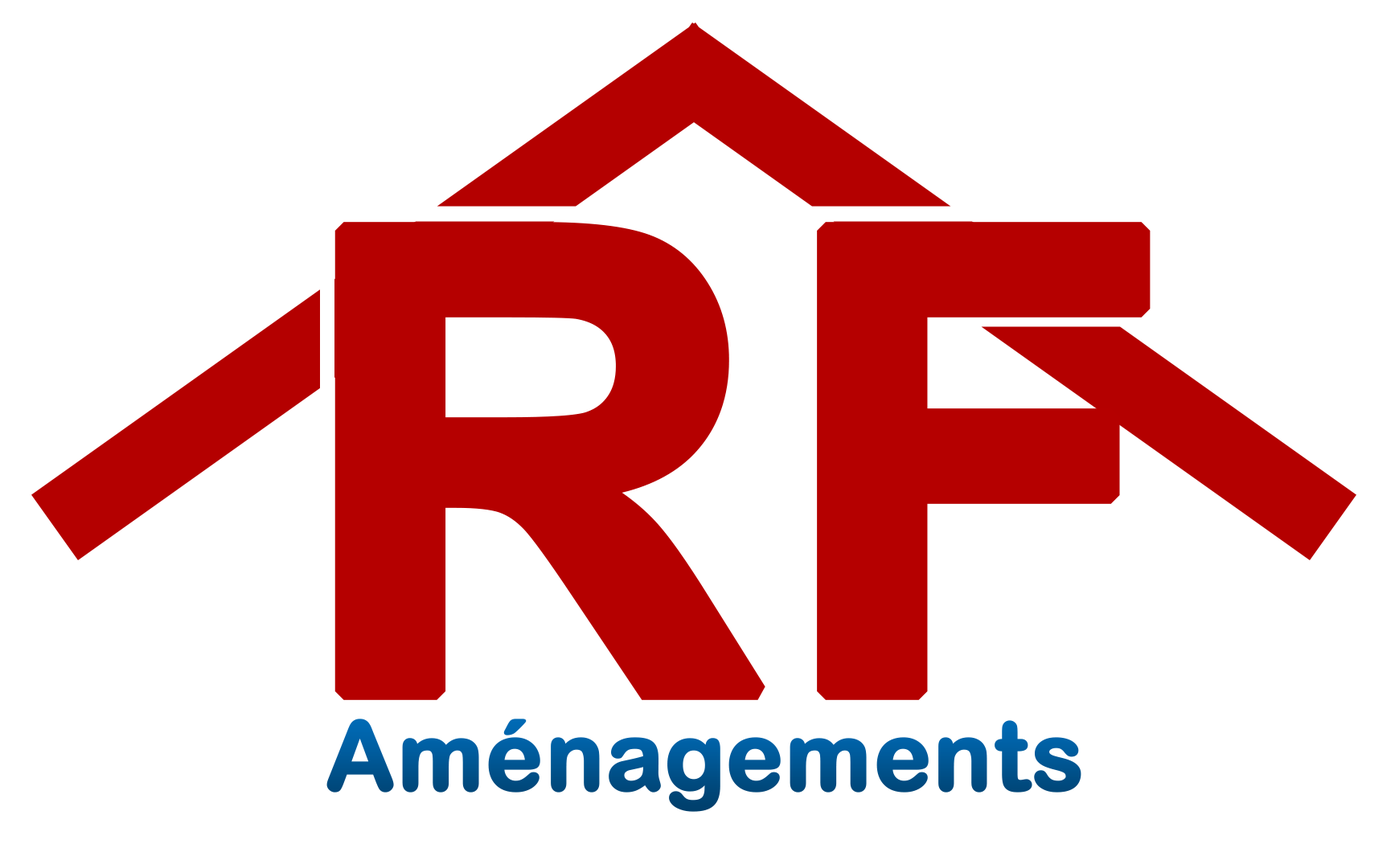
<style>
.page{position:relative;width:1399px;height:852px;background:#ffffff}
.page>*{position:absolute;margin:0}
.t1{font:643.2px "Arial-BoldMT";color:#b50000;font-weight:bold}
.t2{font:96.5px "ArialRoundedMTBold";color:#005592;font-weight:bold}
</style>
<div class="page">
<p class="t1" style="left:334px;top:222px;width:817px;height:478px">RF</p>
<p class="t2" style="left:326px;top:719px;width:755px;height:93px">Aménagements</p>
</div>
